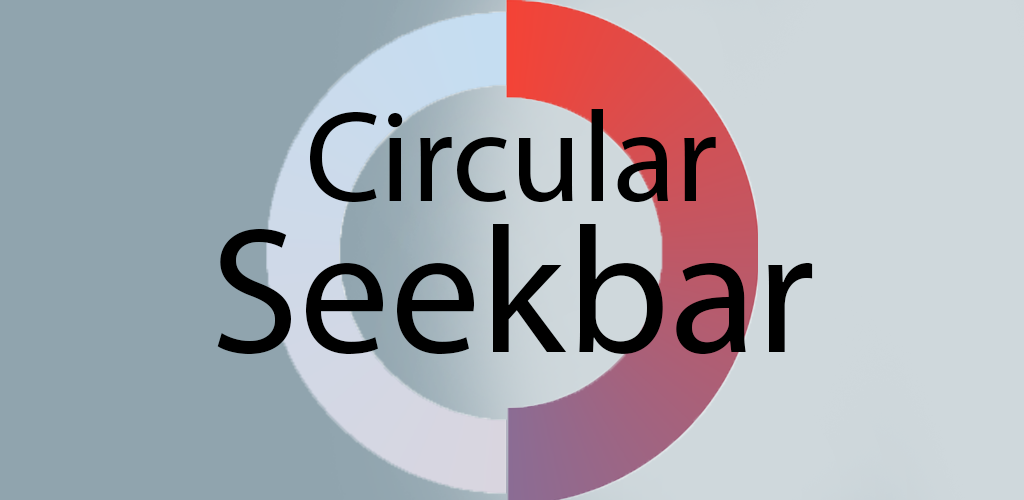
<style>
.page{position:relative;width:1024px;height:500px;background:#90a4ae}
.page>*{position:absolute;margin:0}
.t1{font:130px "MyriadPro-Regular";color:#000000}
.t2{font:180px "MyriadPro-Regular";color:#000000}
</style>
<div class="page">
<p class="t1" style="left:310px;top:109px;width:406px;height:93px">Circular</p>
<p class="t2" style="left:217px;top:224px;width:596px;height:130px">Seekbar</p>
</div>
